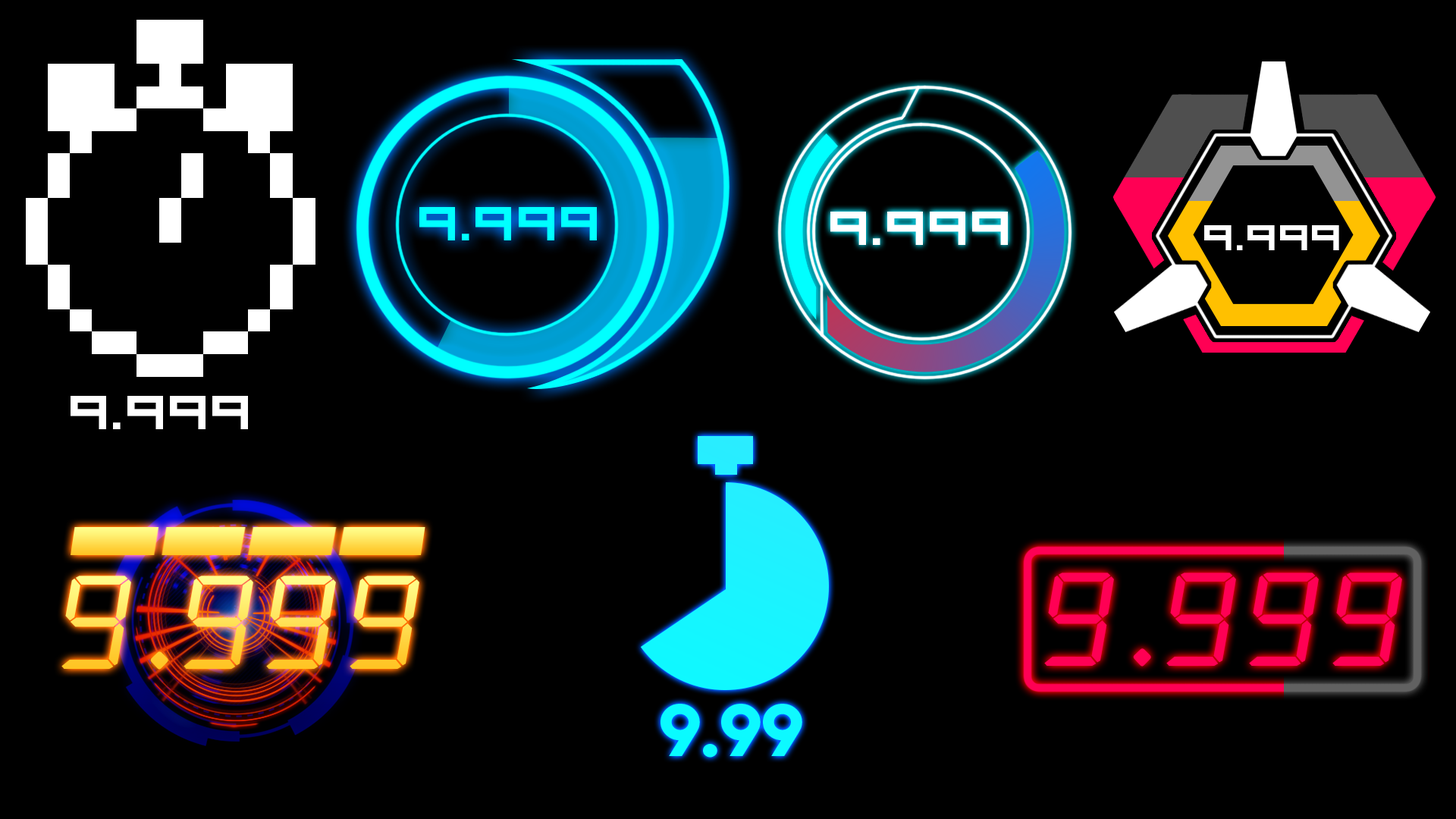
<style>
.page{position:relative;width:1456px;height:819px;background:#000000}
.page>*{position:absolute;margin:0}
.t1{font:66.4px "VisitorTT1BRK";color:#00ffff;scale:1.07 1}
.t2{font:66.4px "VisitorTT1BRK";color:#ffffff;scale:1.07 1}
.t3{font:50.3px "VisitorTT1BRK";color:#ffffff;scale:1.07 1}
.t4{font:132.7px "alarmclock";scale:1.07 1}
.t5{font:132.7px "alarmclock";color:#ff0054;scale:1.07 1}
.t6{font:66.4px "LemonMilk";color:#0cfaff;scale:1.07 1}
</style>
<div class="page">
<p class="t1" style="left:419px;top:207px;width:178px;height:33px">9.999</p>
<p class="t2" style="left:830px;top:212px;width:178px;height:33px">9.999</p>
<p class="t3" style="left:1204px;top:225px;width:135px;height:25px">9.999</p>
<p class="t2" style="left:71px;top:396px;width:177px;height:33px">9.999</p>
<p class="t4" style="left:61px;top:576px;width:358px;height:94px">9.999</p>
<p class="t5" style="left:1044px;top:573px;width:358px;height:94px">9.999</p>
<p class="t6" style="left:660px;top:704px;width:142px;height:54px">9.99</p>
</div>
